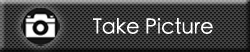
<style>
.page{position:relative;width:250px;height:52px;background:#444444}
.page>*{position:absolute;margin:0}
.t1{font:20.8px "STHeitiTC-Light";color:#ffffff}
</style>
<div class="page">
<p class="t1" style="left:93px;top:18px;width:120px;height:16px">Take Picture</p>
</div>
